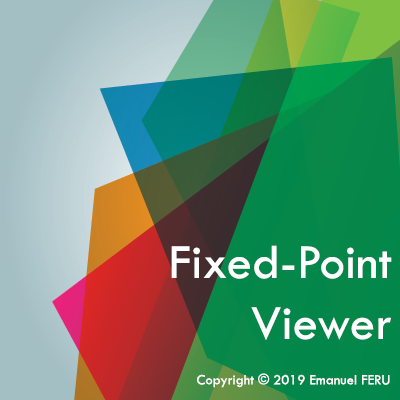
<style>
.page{position:relative;width:400px;height:400px}
.page>*{position:absolute;margin:0}
.t1{font:50.7px "TwCenMT-Regular";color:#fefeff}
.t2{font:14.7px "TwCenMT-Regular";color:#fefeff}
</style>
<div class="page">
<p class="t1" style="left:171px;top:245px;width:221px;height:95px;text-align:right">Fixed-Point<br>Viewer</p>
<p class="t2" style="left:197px;top:373px;width:193px;height:15px">Copyright © 2019 Emanuel FERU</p>
</div>
